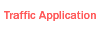
<style>
.page{position:relative;width:100px;height:30px;background:#ffffff}
.page>*{position:absolute;margin:0}
.t1{font:12px "FranklinGothic-Medium";color:#ff5a5a}
</style>
<div class="page">
<p class="t1" style="left:4px;top:11px;width:92px;height:10px">Traffic Application</p>
</div>
